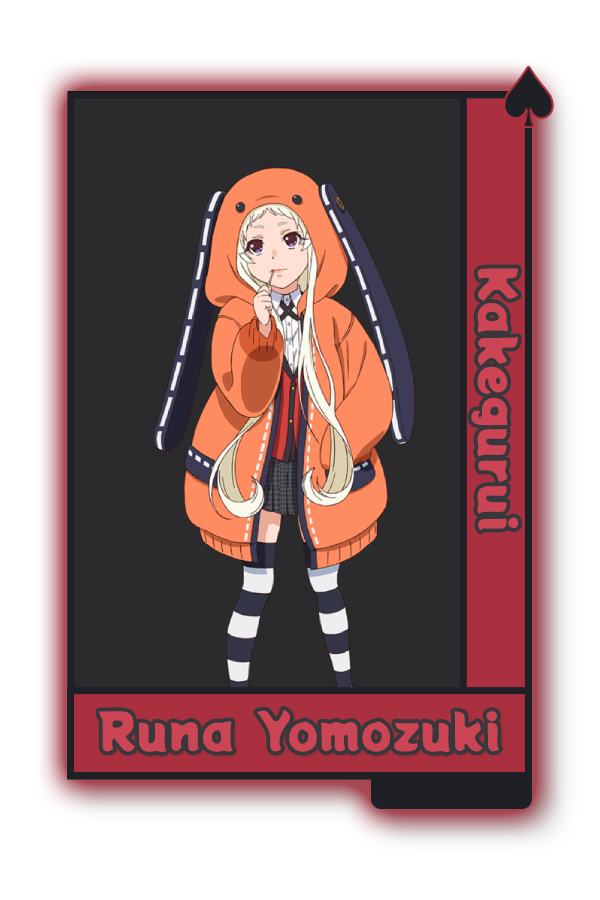
<style>
.page{position:relative;width:600px;height:900px;background:#2b2a2d}
.page>*{position:absolute;margin:0}
.t1{font:80px "DejaVuSans";color:#1e2026}
.t2{font:50px "PottaOne-Regular";color:#cb4554}
</style>
<div class="page">
<p class="t1" style="left:505px;top:67px;width:47px;height:59px">♠️</p>
<p class="t2" style="left:471px;top:268px;width:48px;height:263px;rotate:90deg">Kakegurui</p>
<p class="t2" style="left:99px;top:709px;width:401px;height:44px">Runa Yomozuki</p>
</div>
